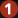
<style>
.page{position:relative;width:18px;height:18px;background:#a52f1d}
.page>*{position:absolute;margin:0}
.t1{font:15px "AvenirLTStd-Heavy";color:#ffffff;font-weight:bold}
</style>
<div class="page">
<p class="t1" style="left:5px;top:3px;width:6px;height:12px">1</p>
</div>
